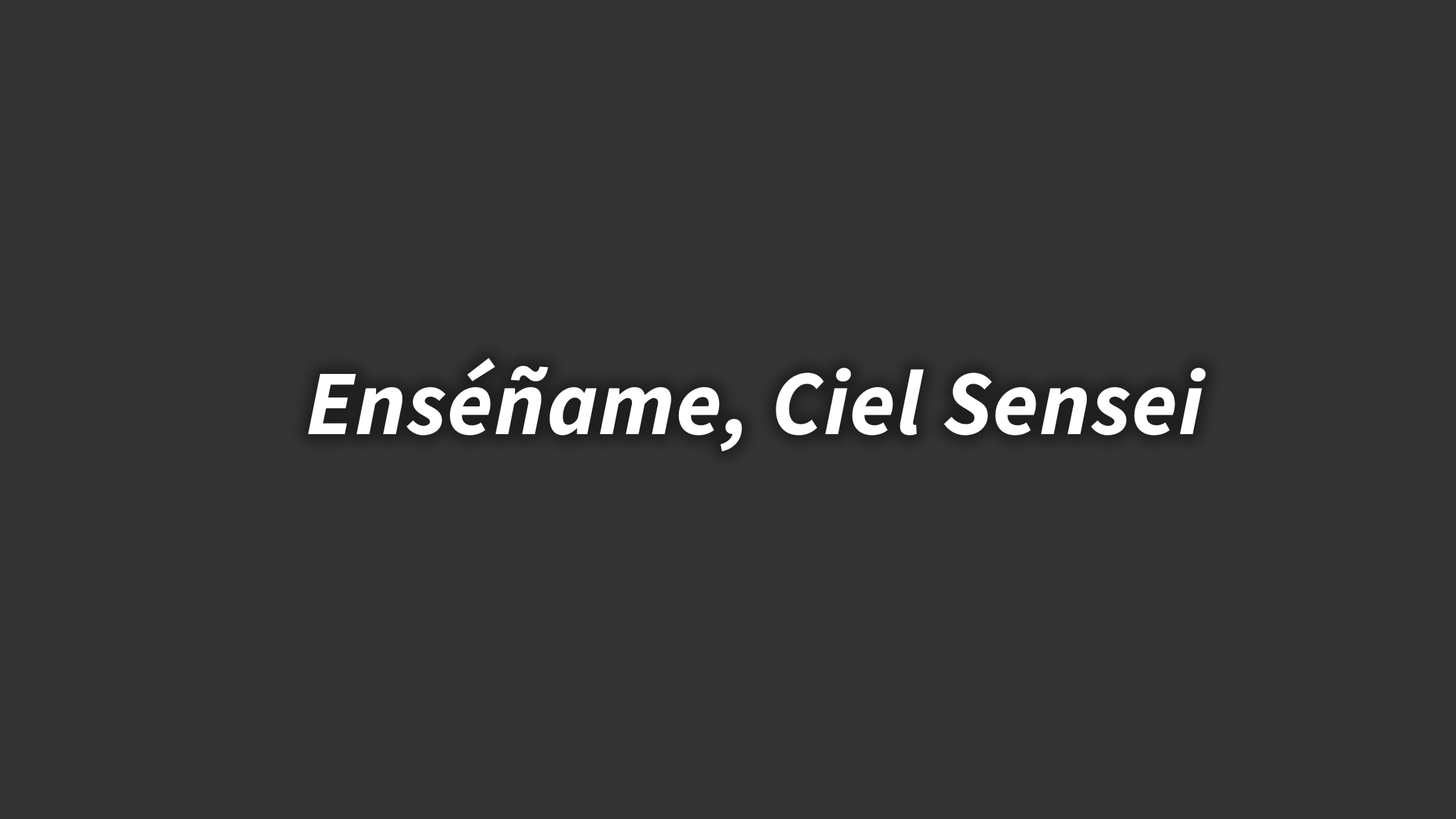
<style>
.page{position:relative;width:1456px;height:819px;background:#333333}
.page>*{position:absolute;margin:0}
.t1{font:92.2px "SourceSansItalic-BoldItalic";letter-spacing:0.013em;color:#ffffff}
</style>
<div class="page">
<p class="t1" style="left:308px;top:358px;width:898px;height:93px">Enséñame, Ciel Sensei</p>
</div>
